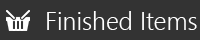
<style>
.page{position:relative;width:200px;height:40px;background:#333333}
.page>*{position:absolute;margin:0}
.t1{font:25px "SegoeUI-Semilight";color:#ffffff}
</style>
<div class="page">
<p class="t1" style="left:47px;top:11px;width:150px;height:19px">Finished Items</p>
</div>
